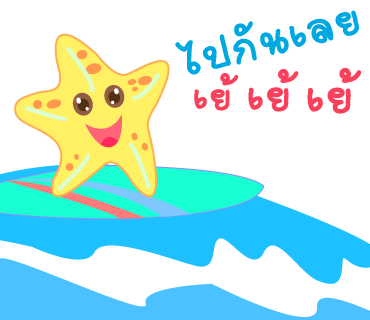
<style>
.page{position:relative;width:370px;height:320px;background:#ffffff}
.page>*{position:absolute;margin:0}
.t1{font:68px "2005_iannnnnMTV";letter-spacing:0.025em;color:#00a8e1;scale:1.06 1}
.t2{font:59px "2005_iannnnnMTV";letter-spacing:0.025em;color:#fa405a;scale:1.06 1}
.t3{font:67px "2005_iannnnnMTV";letter-spacing:0.025em;color:#fa405a;scale:1.06 1}
.t4{font:72px "2005_iannnnnMTV";letter-spacing:0.025em;color:#fa405a;scale:1.06 1}
</style>
<div class="page">
<p class="t1" style="left:175px;top:10px;width:184px;height:65px;rotate:-14deg">ไปกันเลย</p>
<p class="t2" style="left:194px;top:73px;width:45px;height:38px">เย้</p>
<p class="t3" style="left:248px;top:69px;width:51px;height:43px">เย้</p>
<p class="t4" style="left:307px;top:68px;width:54px;height:46px">เย้</p>
</div>
